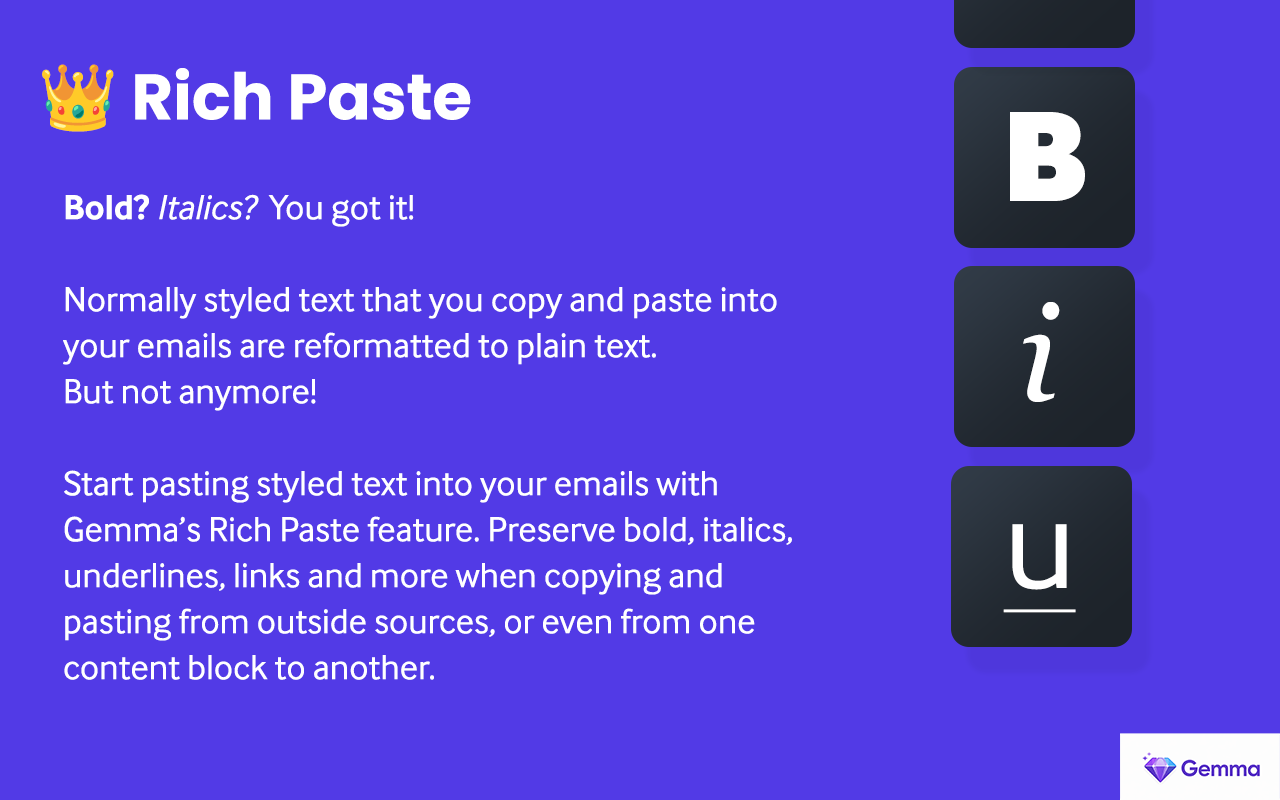
<style>
.page{position:relative;width:1280px;height:800px;background:#523ae6}
.page>*{position:absolute;margin:0}
.t1{font:64px "Poppins-Bold";color:#ffffff}
.t2{font:64px "NotoColorEmoji-SVG";color:#ffffff}
.t3{font:133.2px "InterFace-Black";color:#ffffff}
.t4{font:36px/46px "InterFace-Regular";color:#ffffff}
.t5{font:36px/46px "InterFace-Bold";color:#ffffff}
.t6{font:36px/46px "InterFace-Italic";color:#ffffff}
.t7{font:133.2px "Georgia-Italic";color:#ffffff}
.t8{font:133.2px "InterFace-Regular";color:#ffffff;text-decoration:underline}
</style>
<div class="page">
<p class="t1" style="left:42px;top:64px;width:429px;height:68px"><span class="t2">👑</span> Rich Paste</p>
<p class="t3" style="left:1010px;top:112px;width:75px;height:89px">B</p>
<p class="t4" style="left:63px;top:194px;width:729px;height:486px"><span class="t5">Bold? </span><span class="t6">Italics?</span>  You got it!<br><br>Normally styled text that you copy and paste into your emails are reformatted to plain text. <br>But not anymore!<br><br>Start pasting styled text into your emails with Gemma’s Rich Paste feature. Preserve bold, italics, underlines, links and more when copying and pasting from outside sources, or even from one content block to another.</p>
<p class="t7" style="left:1023px;top:302px;width:37px;height:100px">i</p>
<p class="t8" style="left:1003px;top:524px;width:73px;height:89px">u</p>
</div>
